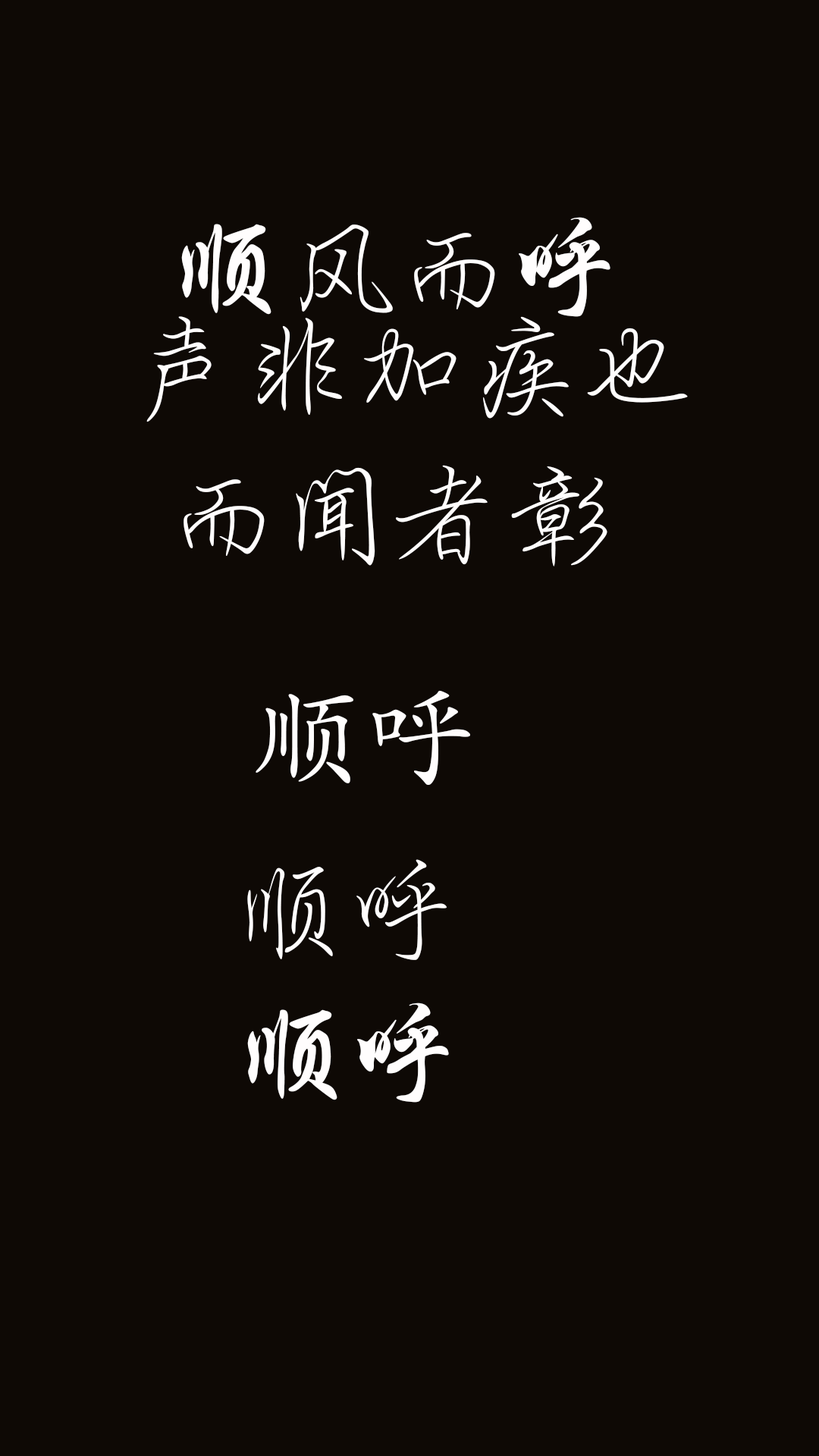
<style>
.page{position:relative;width:819px;height:1456px;background:#0e0905}
.page>*{position:absolute;margin:0}
.t1{font:113.7px "STXingkaiSC-Light";color:#fffdfd}
.t2{font:113.7px "STXingkaiSC-Bold";color:#fffdfd}
.t3{font:113.7px "STKaitiSC-Regular";color:#fffdfd}
</style>
<div class="page">
<p class="t1" style="left:181px;top:217px;width:429px;height:100px"><span class="t2">顺</span>风而<span class="t2">呼</span></p>
<p class="t1" style="left:146px;top:316px;width:542px;height:106px">声非加疾也</p>
<p class="t1" style="left:184px;top:465px;width:423px;height:101px">而闻者彰</p>
<p class="t3" style="left:256px;top:690px;width:214px;height:95px">顺呼</p>
<p class="t1" style="left:247px;top:859px;width:200px;height:101px">顺呼</p>
<p class="t2" style="left:247px;top:1003px;width:202px;height:100px">顺呼</p>
</div>
